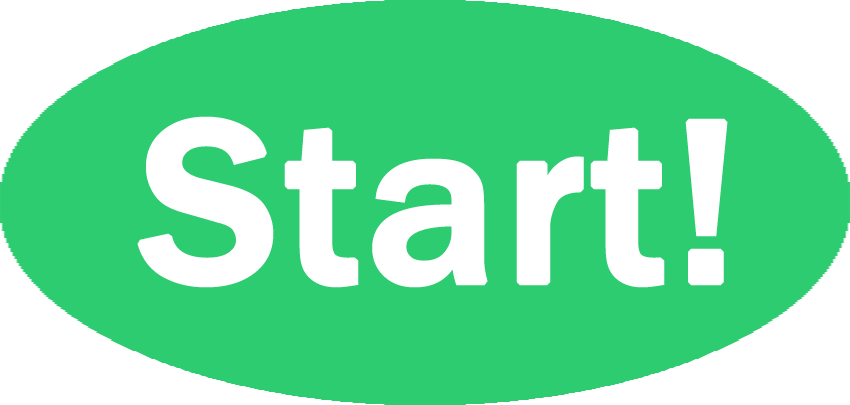
<style>
.page{position:relative;width:850px;height:405px;background:#2ecc71}
.page>*{position:absolute;margin:0}
.t1{font:240px "FranklinGothic-Medium";color:#ffffff;font-weight:bold}
</style>
<div class="page">
<p class="t1" style="left:137px;top:116px;width:591px;height:172px">Start!</p>
</div>
